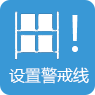
<style>
.page{position:relative;width:95px;height:95px;background:#3998d6}
.page>*{position:absolute;margin:0}
.t1{font:48px "MicrosoftYaHei";color:#ffffff}
.t2{font:16px "MicrosoftYaHei";color:#ffffff}
</style>
<div class="page">
<p class="t1" style="left:72px;top:15px;width:6px;height:37px">！</p>
<p class="t2" style="left:9px;top:67px;width:80px;height:17px">设置警戒线</p>
</div>
